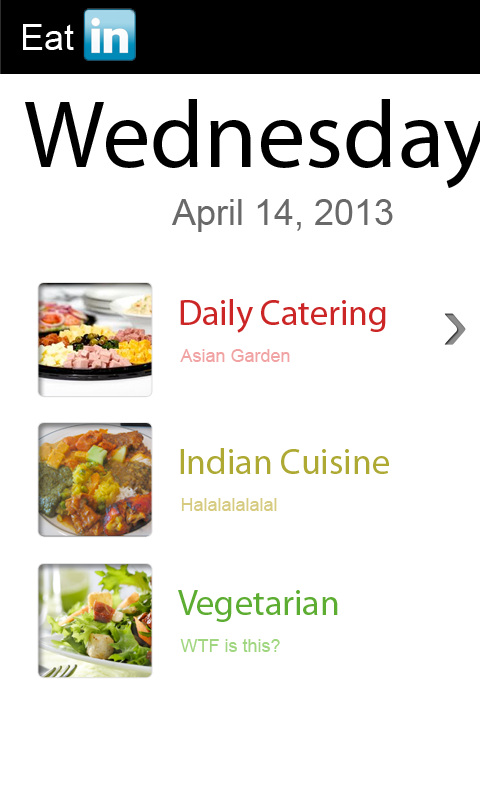
<style>
.page{position:relative;width:480px;height:800px;background:#ffffff}
.page>*{position:absolute;margin:0}
.t1{font:36px "ArialMT";color:#ffffff}
.t2{font:36px "ArialMT";color:#696969}
.t3{font:36px "MyriadPro-Regular";color:#cb2525}
.t4{font:18px "ArialMT";color:#f1a2a2}
.t5{font:36px "MyriadPro-Regular";color:#ada932}
.t6{font:18px "ArialMT";color:#d6cb81}
.t7{font:36px "MyriadPro-Regular";color:#5dad32}
.t8{font:18px "ArialMT";color:#a1d681}
</style>
<div class="page">
<p class="t1" style="left:23px;top:24px;width:51px;height:26px">Eat</p>
<p class="t2" style="left:172px;top:199px;width:221px;height:33px">April 14, 2013</p>
<p class="t3" style="left:180px;top:299px;width:206px;height:34px">Daily Catering</p>
<p class="t4" style="left:180px;top:349px;width:110px;height:13px">Asian Garden</p>
<p class="t5" style="left:180px;top:448px;width:209px;height:26px">Indian Cuisine</p>
<p class="t6" style="left:181px;top:498px;width:96px;height:13px">Halalalalalal</p>
<p class="t7" style="left:178px;top:590px;width:160px;height:32px">Vegetarian</p>
<p class="t8" style="left:180px;top:639px;width:100px;height:13px">WTF is this?</p>
</div>
